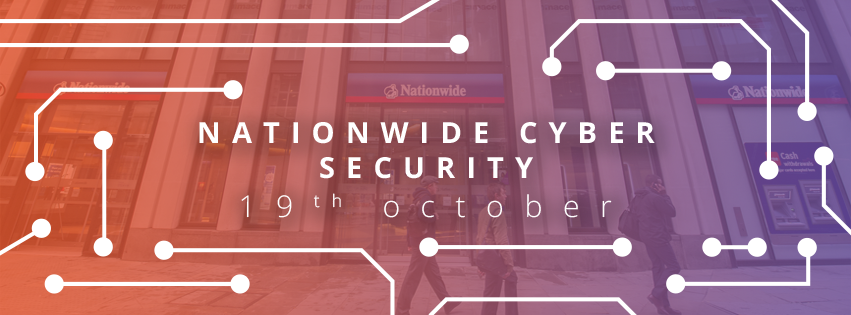
<style>
.page{position:relative;width:851px;height:315px}
.page>*{position:absolute;margin:0}
.t1{font:29px "OpenSans-Bold";letter-spacing:0.38em;color:#ffffff}
.t2{font:30.1px "OpenSans-Light";letter-spacing:0.68em;color:#ffffff}
</style>
<div class="page">
<p class="t1" style="left:199px;top:122px;width:456px;height:57px;text-align:center">NATIONWIDE CYBER SECURITY</p>
<p class="t2" style="left:241px;top:193px;width:371px;height:25px">19th october</p>
</div>
